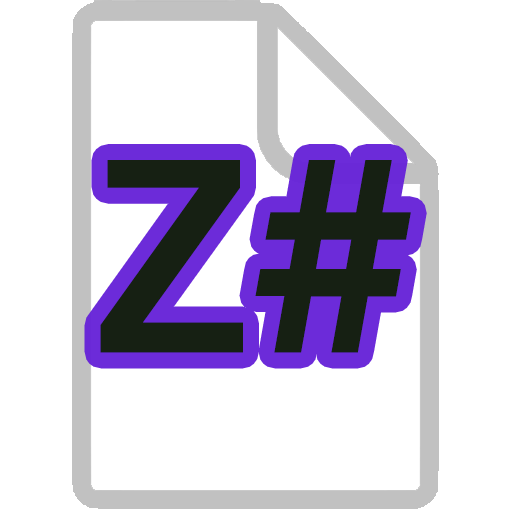
<style>
.page{position:relative;width:512px;height:512px;background:#ffffff}
.page>*{position:absolute;margin:0}
.t1{font:288.6px "FranklinGothic-Medium";color:#162013}
</style>
<div class="page">
<p class="t1" style="left:100px;top:160px;width:311px;height:193px">Z#</p>
</div>
